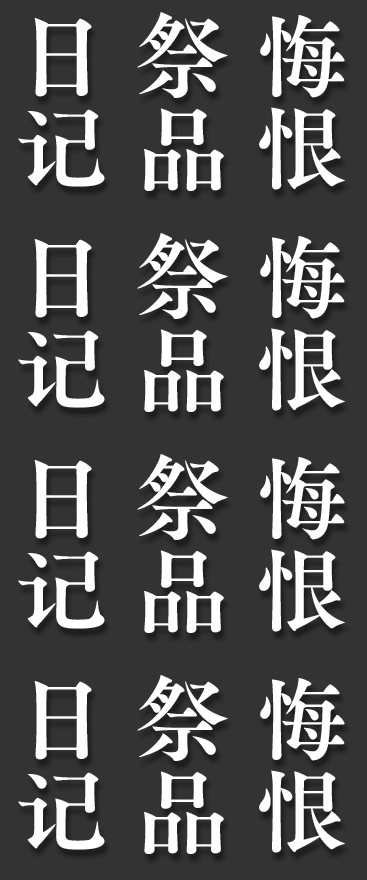
<style>
.page{position:relative;width:367px;height:880px;background:#333333}
.page>*{position:absolute;margin:0}
.t1{font:94.4px "FZFW-ZhuZiAOldMin-B--GB1-0";color:#ffffff}
.t2{font:91.1px "FZFW-ZhuZiAOldMin-B--GB1-0";color:#ffffff}
.t3{font:93px "FZFW-ZhuZiAOldMin-B--GB1-0";color:#ffffff}
</style>
<div class="page">
<p class="t1" style="left:137px;top:12px;width:91px;height:179px">祭品</p>
<p class="t2" style="left:259px;top:15px;width:86px;height:175px">悔恨</p>
<p class="t3" style="left:18px;top:18px;width:87px;height:169px">日记</p>
<p class="t1" style="left:137px;top:233px;width:91px;height:179px">祭品</p>
<p class="t3" style="left:18px;top:239px;width:87px;height:169px">日记</p>
<p class="t2" style="left:259px;top:236px;width:86px;height:175px">悔恨</p>
<p class="t3" style="left:18px;top:460px;width:87px;height:169px">日记</p>
<p class="t1" style="left:137px;top:454px;width:91px;height:179px">祭品</p>
<p class="t2" style="left:259px;top:457px;width:86px;height:175px">悔恨</p>
<p class="t1" style="left:137px;top:675px;width:91px;height:179px">祭品</p>
<p class="t2" style="left:259px;top:678px;width:86px;height:175px">悔恨</p>
<p class="t3" style="left:18px;top:681px;width:87px;height:169px">日记</p>
</div>
